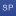
<style>
.page{position:relative;width:16px;height:16px}
.page>*{position:absolute;margin:0}
.t1{font:8px "Helvetica"}
</style>
<div class="page">
<p class="t1" style="left:2px;top:4px;width:6px;height:7px">S</p>
<p class="t1" style="left:8px;top:4px;width:5px;height:7px">P</p>
</div>
